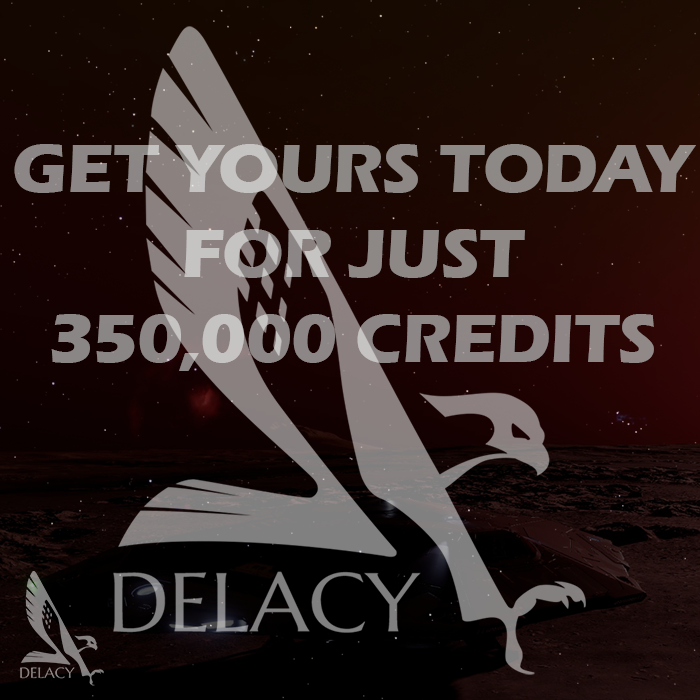
<style>
.page{position:relative;width:700px;height:700px}
.page>*{position:absolute;margin:0}
.t1{font:71px "ErasITC-Bold";color:#8d8886}
</style>
<div class="page">
<p class="t1" style="left:14px;top:144px;width:682px;height:227px;text-align:center">GET YOURS TODAY<br>FOR JUST <br>350,000 CREDITS</p>
</div>
